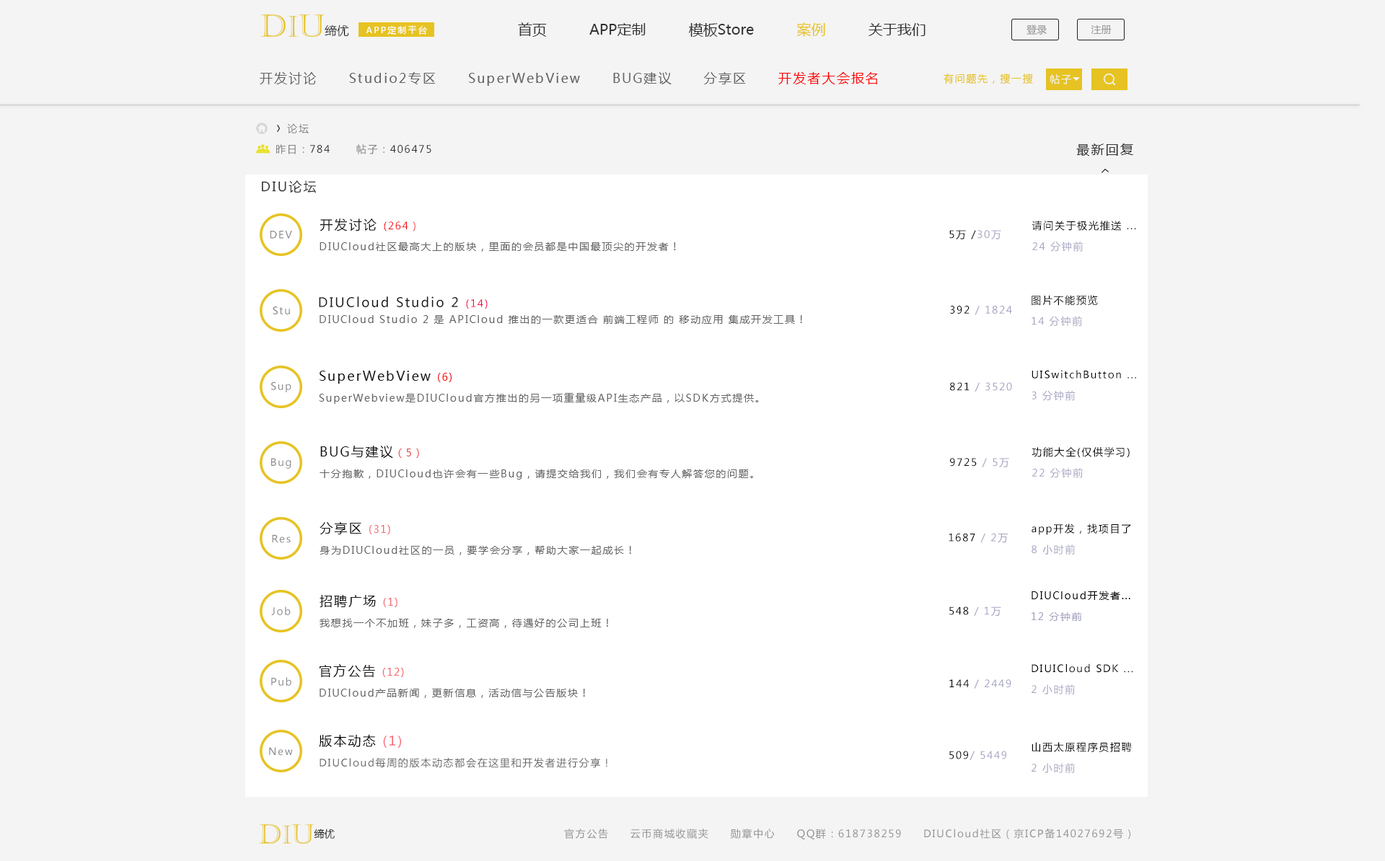
<style>
.page{position:relative;width:1385px;height:861px;background:#f4f4f4}
.page>*{position:absolute;margin:0}
.t1{font:30.8px "Castellar";color:#e6c322;text-transform:uppercase}
.t2{font:28.8px "Castellar";color:#e6c322}
.t3{font:12.1px "YouYuan";color:#000000}
.t4{font:8.7px "MicrosoftYaHei";letter-spacing:0.18em;color:#ffffff}
.t5{font:14.4px "MicrosoftYaHei";color:#323232}
.t6{font:14.4px "MicrosoftYaHei";color:#e6c322}
.t7{font:10.1px "MicrosoftYaHei";color:#999999}
.t8{font:13px "MicrosoftYaHei";letter-spacing:0.12em;color:#666666}
.t9{font:13px "MicrosoftYaHei";letter-spacing:0.12em;color:#ff0000}
.t10{font:10.1px "MicrosoftYaHei";letter-spacing:0.12em;color:#e6c322}
.t11{font:10.1px "MicrosoftYaHei";letter-spacing:0.12em;color:#f5f5f5}
.t12{font:10.1px "MicrosoftYaHei";letter-spacing:0.12em;color:#808080}
.t13{font:10.1px "MicrosoftYaHei";letter-spacing:0.12em;color:#333333}
.t14{font:13px "MicrosoftYaHei";letter-spacing:0.12em;color:#333333}
.t15{font:10.1px "MicrosoftYaHei";letter-spacing:0.12em;color:#f8080d}
.t16{font:13px "MicrosoftYaHei";letter-spacing:0.12em;color:#1a1a1a}
.t17{font:10.1px/20.9px "MicrosoftYaHei";letter-spacing:0.12em;color:#000000}
.t18{font:10.1px/20.9px "MicrosoftYaHei";letter-spacing:0.12em;color:#a5a5c2}
.t19{font:10.1px "MicrosoftYaHei";letter-spacing:0.12em;color:#8b8b8b}
.t20{font:10.1px "MicrosoftYaHei";letter-spacing:0.12em;color:#000000}
.t21{font:10.1px "MicrosoftYaHei";letter-spacing:0.12em;color:#a5a5c2}
.t22{font:10.1px "MicrosoftYaHei";letter-spacing:0.12em;color:#666666}
.t23{font:10.1px "MicrosoftYaHei";letter-spacing:0.12em;color:#f40951}
.t24{font:10.1px/20.9px "MicrosoftYaHei";letter-spacing:0.12em;color:#666666}
.t25{font:13px/20.9px "MicrosoftYaHei";letter-spacing:0.12em;color:#1a1a1a}
.t26{font:10.1px/20.9px "MicrosoftYaHei";letter-spacing:0.12em;color:#f4070c}
.t27{font:10.1px/20.9px "MicrosoftYaHei";letter-spacing:0.12em;color:#e24e50}
.t28{font:10.1px/20.9px "MicrosoftYaHei";letter-spacing:0.12em;color:#f46c75}
.t29{font:13px/20.9px "MicrosoftYaHei";letter-spacing:0.12em;color:#000000}
.t30{font:13px/20.9px "MicrosoftYaHei";letter-spacing:0.12em;color:#f46c75}
.t31{font:26.4px "Castellar";color:#e6c322;text-transform:uppercase}
.t32{font:24.7px "Castellar";color:#e6c322}
.t33{font:10.4px "YouYuan"}
.t34{font:10.1px "MicrosoftYaHei";letter-spacing:0.12em;color:#929292}
</style>
<div class="page">
<p class="t1" style="left:260px;top:14px;width:65px;height:23px">d<span class="t2">i</span>u</p>
<p class="t3" style="left:325px;top:25px;width:24px;height:12px">缔优</p>
<p class="t4" style="left:366px;top:25px;width:61px;height:10px">APP定制平台</p>
<p class="t5" style="left:518px;top:22px;width:407px;height:15px">首页          APP定制          模板Store          <span class="t6">案例</span>          关于我们</p>
<p class="t7" style="left:1026px;top:25px;width:20px;height:10px">登录</p>
<p class="t7" style="left:1090px;top:25px;width:21px;height:9px">注册</p>
<p class="t8" style="left:260px;top:72px;width:617px;height:14px">开发讨论      Studio2专区      SuperWebView      BUG建议      分享区      <span class="t9">开发者大会报名</span></p>
<p class="t10" style="left:943px;top:74px;width:90px;height:10px">有问题先，搜一搜</p>
<p class="t11" style="left:1050px;top:74px;width:21px;height:10px">帖子</p>
<p class="t12" style="left:287px;top:123px;width:22px;height:11px">论坛</p>
<p class="t13" style="left:276px;top:144px;width:155px;height:10px"><span class="t12">昨日：</span>784<span class="t12">      帖子：</span>406475</p>
<p class="t14" style="left:1076px;top:144px;width:57px;height:12px">最新回复</p>
<p class="t14" style="left:262px;top:180px;width:55px;height:13px">DIU论坛</p>
<p class="t15" style="left:319px;top:219px;width:96px;height:13px"><span class="t16">开发讨论 </span>(264）</p>
<p class="t17" style="left:1031px;top:221px;width:105px;height:31px">请问关于极光推送 ...<br><span class="t18">24 分钟前</span></p>
<p class="t19" style="left:270px;top:231px;width:22px;height:8px">DEV</p>
<p class="t20" style="left:949px;top:230px;width:52px;height:9px">5万 /<span class="t21">30万</span></p>
<p class="t22" style="left:319px;top:242px;width:357px;height:10px">DIUCloud社区最高大上的版块，里面的会员都是中国最顶尖的开发者！</p>
<p class="t16" style="left:319px;top:296px;width:169px;height:13px">DIUCloud Studio 2 <span class="t23">(14)</span></p>
<p class="t21" style="left:950px;top:306px;width:62px;height:9px"><span class="t20">392 </span>/ 1824</p>
<p class="t17" style="left:1031px;top:295px;width:67px;height:32px">图片不能预览<br><span class="t18">14 分钟前</span></p>
<p class="t19" style="left:273px;top:307px;width:17px;height:7px">Stu</p>
<p class="t22" style="left:319px;top:315px;width:483px;height:9px">DIUCloud Studio 2 是 APICloud 推出的一款更适合 前端工程师 的 移动应用 集成开发工具！</p>
<p class="t24" style="left:319px;top:371px;width:440px;height:33px"><span class="t25">SuperWebView </span><span class="t26">(6)<br></span>SuperWebview是DIUCloud官方推出的另一项重量级API生态产品，以SDK方式提供。</p>
<p class="t17" style="left:1031px;top:370px;width:105px;height:31px">UISwitchButton ...<br><span class="t18">3 分钟前</span></p>
<p class="t19" style="left:271px;top:382px;width:20px;height:10px">Sup</p>
<p class="t21" style="left:950px;top:382px;width:62px;height:10px"><span class="t20">821</span> / 3520</p>
<p class="t24" style="left:319px;top:446px;width:434px;height:34px"><span class="t25">BUG与建议</span><span class="t27">（5）<br></span>十分抱歉，DIUCloud也许会有一些Bug，请提交给我们，我们会有专人解答您的问题。</p>
<p class="t17" style="left:1031px;top:447px;width:98px;height:31px">功能大全(仅供学习)<br><span class="t18">22 分钟前</span></p>
<p class="t19" style="left:271px;top:458px;width:20px;height:11px">Bug</p>
<p class="t20" style="left:950px;top:458px;width:59px;height:9px">9725<span class="t21"> / 5万</span></p>
<p class="t24" style="left:319px;top:522px;width:312px;height:33px"><span class="t25">分享区 </span><span class="t28">(31)<br></span>身为DIUCloud社区的一员，要学会分享，帮助大家一起成长！</p>
<p class="t20" style="left:948px;top:533px;width:60px;height:10px">1687<span class="t21"> / 2万</span></p>
<p class="t17" style="left:1031px;top:524px;width:100px;height:31px">app开发，找项目了<br><span class="t18">8 小时前</span></p>
<p class="t19" style="left:272px;top:534px;width:19px;height:9px">Res</p>
<p class="t17" style="left:1031px;top:591px;width:99px;height:30px">DIUCloud开发者...<br><span class="t18">12 分钟前</span></p>
<p class="t24" style="left:319px;top:595px;width:289px;height:33px"><span class="t25">招聘广场 </span><span class="t28">(1)<br></span>我想找一个不加班，妹子多，工资高，待遇好的公司上班！</p>
<p class="t19" style="left:271px;top:607px;width:20px;height:8px">Job</p>
<p class="t21" style="left:949px;top:607px;width:52px;height:10px"><span class="t20">548 </span>/ 1万</p>
<p class="t24" style="left:319px;top:664px;width:266px;height:34px"><span class="t25">官方公告 </span><span class="t28">(12)<br></span>DIUCloud产品新闻，更新信息，活动信与公告版块！</p>
<p class="t17" style="left:1031px;top:664px;width:102px;height:31px">DIUICloud SDK ...<br><span class="t18">2 小时前</span></p>
<p class="t19" style="left:271px;top:677px;width:20px;height:9px">Pub</p>
<p class="t21" style="left:949px;top:679px;width:62px;height:10px"><span class="t20">144 </span>/ 2449</p>
<p class="t24" style="left:319px;top:734px;width:288px;height:34px"><span class="t29">版本动态 </span><span class="t30">(1)<br></span>DIUCloud每周的版本动态都会在这里和开发者进行分享！</p>
<p class="t19" style="left:269px;top:747px;width:24px;height:9px">New</p>
<p class="t17" style="left:1031px;top:742px;width:101px;height:31px">山西太原程序员招聘<br><span class="t18">2 小时前</span></p>
<p class="t21" style="left:949px;top:751px;width:57px;height:9px"><span class="t20">509</span>/ 5449</p>
<p class="t31" style="left:259px;top:824px;width:55px;height:20px">d<span class="t32">i</span>u</p>
<p class="t33" style="left:314px;top:829px;width:21px;height:10px">缔优</p>
<p class="t34" style="left:564px;top:829px;width:566px;height:10px">官方公告     云币商城收藏夹     勋章中心     QQ群：618738259     DIUCloud社区（京ICP备14027692号）</p>
</div>
